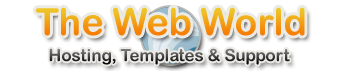
<style>
.page{position:relative;width:341px;height:71px;background:#ffffff}
.page>*{position:absolute;margin:0}
.t1{font:37.5px "ArialRoundedMTBold"}
.t2{font:16.7px "ArialRoundedMTBold"}
</style>
<div class="page">
<p class="t1" style="left:35px;top:7px;width:270px;height:29px">The Web World</p>
<p class="t2" style="left:49px;top:48px;width:241px;height:17px">Hosting, Templates &amp; Support</p>
</div>
